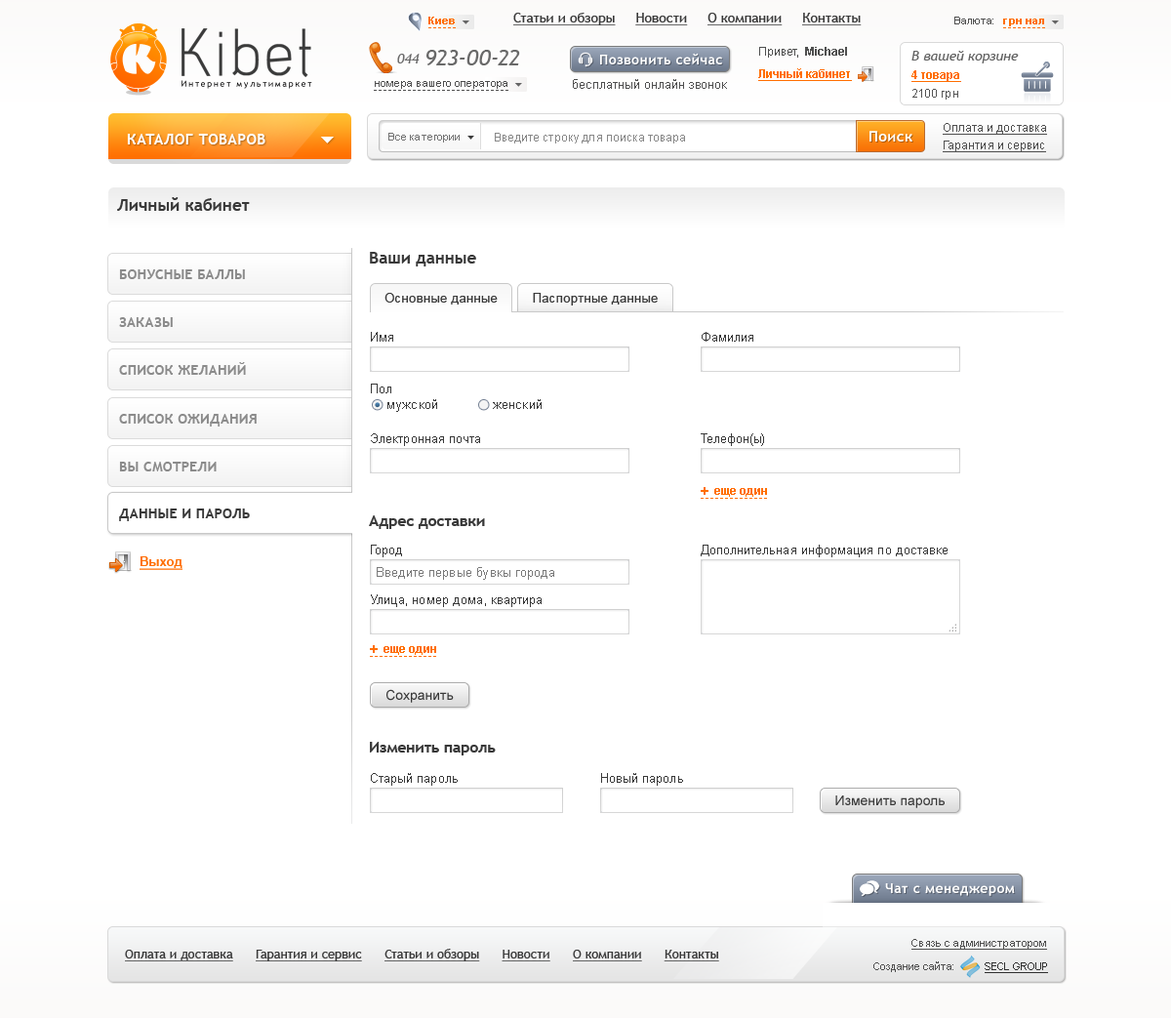
<style>
.page{position:relative;width:1171px;height:1018px;background:#ffffff}
.page>*{position:absolute;margin:0}
.t1{font:10.7px "Arial-BoldMT";color:#ff6e01}
.t2{font:13.7px "TrebuchetMS";color:#393939;text-decoration:underline}
.t3{font:10.7px "ArialMT";color:#4f4f4f}
.t4{font:85.4px "Acid";color:#3b3b3b}
.t5{font:13.7px "TrebuchetMS-Italic";color:#696969}
.t6{font:22.4px "TrebuchetMS-Italic";color:#696969}
.t7{font:13.7px "TrebuchetMS-Bold";letter-spacing:0.03em;color:#ffffff}
.t8{font:11.7px "ArialMT";color:#4f4f4f}
.t9{font:11.7px "Arial-BoldMT";color:#4f4f4f}
.t10{font:13.7px "TrebuchetMS-Italic";color:#616161}
.t11{font:11.7px "Arial-BoldMT";color:#ff6e01;text-decoration:underline}
.t12{font:8.6px "TrebuchetMS";letter-spacing:0.2em;color:#060606}
.t13{font:12.7px "ArialMT";color:#4f4f4f}
.t14{font:11.7px "ArialMT";color:#535353}
.t15{font:11.7px "ArialMT";color:#4f4f4f;text-decoration:underline}
.t16{font:14.6px "TrebuchetMS-Bold";letter-spacing:0.03em;color:#ffffff}
.t17{font:10.7px "ArialMT";color:#727272}
.t18{font:11.7px "ArialMT";color:#888888}
.t19{font:16.6px "TrebuchetMS-Bold";color:#393939}
.t20{font:13.7px "TrebuchetMS-Bold";letter-spacing:0.02em;color:#8b8b8b}
.t21{font:12.7px "ArialMT";letter-spacing:0.02em;color:#393939}
.t22{font:12.7px "ArialMT";color:#393939}
.t23{font:11.7px "Arial-BoldMT";color:#ff6e01}
.t24{font:13.7px "Arial-BoldMT";color:#ff6e01}
.t25{font:13.7px "TrebuchetMS-Bold";letter-spacing:0.02em;color:#393939}
.t26{font:15.1px "TrebuchetMS-Bold";color:#393939}
.t27{font:12.7px "Arial-BoldMT";color:#ff6e01;text-decoration:underline}
.t28{font:12.7px "ArialMT";color:#797979}
.t29{font:13.7px "ArialMT";color:#393939}
.t30{font:10.7px "ArialMT";color:#4f4f4f;text-decoration:underline}
.t31{font:12.7px "TrebuchetMS";color:#393939;text-decoration:underline}
.t32{font:10.7px "ArialMT";color:#303030;text-decoration:underline}
</style>
<div class="page">
<p class="t1" style="left:428px;top:17px;width:27px;height:7px">Киев</p>
<p class="t2" style="left:513px;top:13px;width:349px;height:12px">Статьи и обзоры     Новости     О компании     Контакты</p>
<p class="t3" style="left:955px;top:17px;width:39px;height:7px">Валюта:</p>
<p class="t4" style="left:182px;top:28px;width:129px;height:49px">Kibet</p>
<p class="t1" style="left:1003px;top:19px;width:41px;height:7px">грн нал</p>
<p class="t5" style="left:397px;top:54px;width:23px;height:9px">044</p>
<p class="t6" style="left:427px;top:50px;width:93px;height:15px">923-00-22</p>
<p class="t7" style="left:600px;top:53px;width:122px;height:11px">Позвонить сейчас</p>
<p class="t8" style="left:759px;top:47px;width:88px;height:11px">Привет,  <span class="t9">Michael</span></p>
<p class="t10" style="left:912px;top:51px;width:107px;height:12px">В вашей корзине</p>
<p class="t11" style="left:758px;top:68px;width:94px;height:13px">Личный кабинет</p>
<p class="t11" style="left:912px;top:70px;width:49px;height:12px">4 товара</p>
<p class="t12" style="left:182px;top:80px;width:130px;height:9px">Интернет мультимаркет</p>
<p class="t3" style="left:375px;top:81px;width:133px;height:8px">номера вашего оператора</p>
<p class="t13" style="left:573px;top:79px;width:154px;height:10px">бесплатный онлайн звонок</p>
<p class="t14" style="left:913px;top:89px;width:46px;height:11px">2100 грн</p>
<p class="t15" style="left:943px;top:123px;width:104px;height:12px">Оплата и доставка</p>
<p class="t16" style="left:127px;top:134px;width:138px;height:10px">КАТАЛОГ ТОВАРОВ</p>
<p class="t17" style="left:388px;top:133px;width:72px;height:10px">Все категории</p>
<p class="t18" style="left:495px;top:133px;width:190px;height:10px">Введите строку для поиска товара</p>
<p class="t16" style="left:870px;top:131px;width:43px;height:11px">Поиск</p>
<p class="t15" style="left:943px;top:141px;width:103px;height:11px">Гарантия и сервис</p>
<p class="t19" style="left:117px;top:197px;width:133px;height:14px">Личный кабинет</p>
<p class="t19" style="left:370px;top:252px;width:106px;height:14px">Ваши данные</p>
<p class="t20" style="left:119px;top:269px;width:126px;height:10px">БОНУСНЫЕ БАЛЛЫ</p>
<p class="t21" style="left:385px;top:293px;width:113px;height:12px">Основные данные</p>
<p class="t21" style="left:533px;top:293px;width:125px;height:13px">Паспортные данные</p>
<p class="t20" style="left:119px;top:317px;width:54px;height:10px">ЗАКАЗЫ</p>
<p class="t22" style="left:371px;top:332px;width:22px;height:10px">Имя</p>
<p class="t22" style="left:702px;top:332px;width:52px;height:10px">Фамилия</p>
<p class="t20" style="left:119px;top:362px;width:127px;height:13px">СПИСОК ЖЕЛАНИЙ</p>
<p class="t22" style="left:371px;top:384px;width:20px;height:9px">Пол</p>
<p class="t22" style="left:388px;top:399px;width:49px;height:13px">мужской</p>
<p class="t22" style="left:493px;top:399px;width:49px;height:10px">женский</p>
<p class="t20" style="left:119px;top:414px;width:138px;height:13px">СПИСОК ОЖИДАНИЯ</p>
<p class="t22" style="left:371px;top:433px;width:109px;height:13px">Электронная почта</p>
<p class="t22" style="left:701px;top:433px;width:63px;height:13px">Телефон(ы)</p>
<p class="t20" style="left:119px;top:462px;width:98px;height:9px">ВЫ СМОТРЕЛИ</p>
<p class="t23" style="left:701px;top:487px;width:66px;height:10px"><span class="t24">+</span>  еще один</p>
<p class="t25" style="left:119px;top:509px;width:131px;height:12px">ДАННЫЕ И ПАРОЛЬ</p>
<p class="t26" style="left:369px;top:515px;width:116px;height:14px">Адрес доставки</p>
<p class="t22" style="left:371px;top:545px;width:31px;height:12px">Город</p>
<p class="t22" style="left:701px;top:545px;width:247px;height:12px">Дополнительная информация по доставке</p>
<p class="t27" style="left:140px;top:556px;width:43px;height:14px">Выход</p>
<p class="t28" style="left:377px;top:567px;width:177px;height:13px">Введите первые бувкы города</p>
<p class="t22" style="left:371px;top:594px;width:171px;height:13px">Улица, номер дома, квартира</p>
<p class="t23" style="left:370px;top:645px;width:66px;height:10px"><span class="t24">+</span>  еще один</p>
<p class="t29" style="left:387px;top:689px;width:67px;height:14px">Сохранить</p>
<p class="t26" style="left:370px;top:742px;width:126px;height:13px">Изменить пароль</p>
<p class="t22" style="left:371px;top:773px;width:87px;height:13px">Старый пароль</p>
<p class="t22" style="left:601px;top:773px;width:82px;height:13px">Новый пароль</p>
<p class="t29" style="left:836px;top:796px;width:109px;height:12px">Изменить пароль</p>
<p class="t7" style="left:885px;top:883px;width:130px;height:13px">Чат с менеджером</p>
<p class="t30" style="left:912px;top:939px;width:135px;height:11px">Связь с администратором</p>
<p class="t31" style="left:125px;top:949px;width:594px;height:12px">Оплата и доставка      Гарантия и сервис      Статьи и обзоры      Новости      О компании      Контакты</p>
<p class="t3" style="left:874px;top:961px;width:80px;height:11px">Создание сайта:</p>
<p class="t32" style="left:985px;top:962px;width:63px;height:11px">SECL GROUP</p>
</div>
